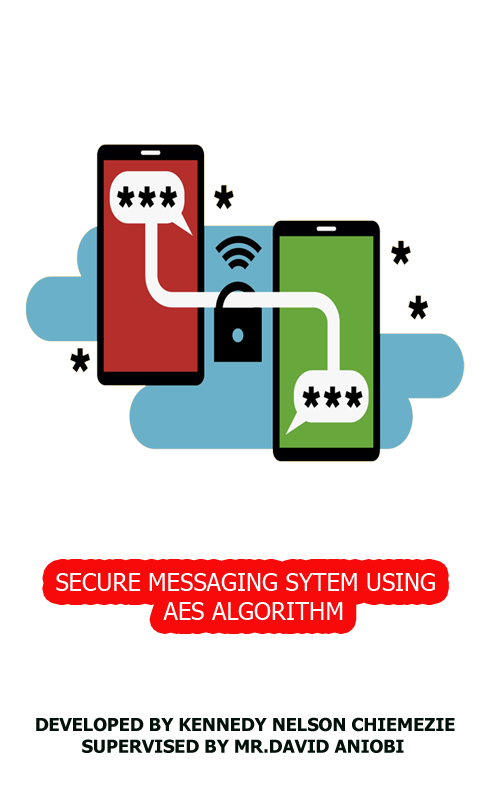
<style>
.page{position:relative;width:500px;height:800px;background:#ffffff}
.page>*{position:absolute;margin:0}
.t1{font:24px "Tahoma";color:#ffffff}
.t2{font:18px "Tahoma-Bold";color:#021109}
</style>
<div class="page">
<p class="t1" style="left:56px;top:573px;width:379px;height:47px">SECURE MESSAGING SYTEM USING <br>   AES ALGORITHM</p>
<p class="t2" style="left:36px;top:717px;width:419px;height:36px">DEVELOPED BY KENNEDY NELSON CHIEMEZIE<br>   SUPERVISED BY MR.DAVID ANIOBI</p>
</div>
